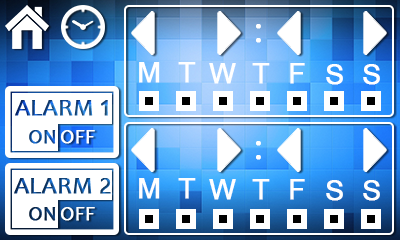
<style>
.page{position:relative;width:400px;height:240px;background:#ffffff}
.page>*{position:absolute;margin:0}
.t1{font:36px "Ebrima";color:#ffffff;font-weight:bold}
.t2{font:28px "ArialMT";color:#ffffff;font-weight:bold}
</style>
<div class="page">
<p class="t1" style="left:256px;top:24px;width:5px;height:19px">:</p>
<p class="t2" style="left:139px;top:62px;width:21px;height:21px">M</p>
<p class="t2" style="left:178px;top:62px;width:18px;height:21px">T</p>
<p class="t2" style="left:209px;top:63px;width:27px;height:21px">W</p>
<p class="t2" style="left:252px;top:63px;width:18px;height:21px">T</p>
<p class="t2" style="left:290px;top:63px;width:15px;height:21px">F</p>
<p class="t2" style="left:326px;top:64px;width:17px;height:21px">S</p>
<p class="t2" style="left:363px;top:64px;width:17px;height:21px">S</p>
<p class="t1" style="left:256px;top:141px;width:5px;height:19px">:</p>
<p class="t2" style="left:139px;top:178px;width:21px;height:21px">M</p>
<p class="t2" style="left:178px;top:178px;width:18px;height:21px">T</p>
<p class="t2" style="left:209px;top:179px;width:27px;height:21px">W</p>
<p class="t2" style="left:252px;top:179px;width:18px;height:21px">T</p>
<p class="t2" style="left:290px;top:179px;width:15px;height:21px">F</p>
<p class="t2" style="left:326px;top:180px;width:17px;height:21px">S</p>
<p class="t2" style="left:363px;top:180px;width:17px;height:21px">S</p>
</div>
